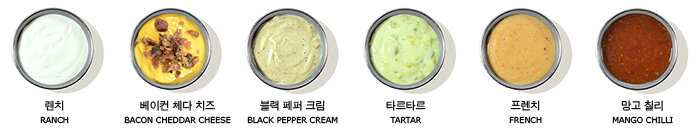
<style>
.page{position:relative;width:700px;height:131px;background:#ffffff}
.page>*{position:absolute;margin:0}
.t1{font:8px/14px "Verdana";color:#000000}
.t2{font:11px/14px "SandJg";color:#000000}
.t3{font:8px/13.1px "Verdana";color:#000000}
</style>
<div class="page">
<p class="t1" style="left:40px;top:100px;width:29px;height:24px;text-align:center"><span class="t2">랜치<br></span>RANCH</p>
<p class="t1" style="left:124px;top:100px;width:107px;height:24px;text-align:center"><span class="t2">베이컨 체다 치즈<br></span>BACON CHEDDAR CHEESE</p>
<p class="t1" style="left:247px;top:100px;width:91px;height:24px;text-align:center"><span class="t2">블랙 페퍼 크림<br></span>BLACK PEPPER CREA<span class="t3">M</span></p>
<p class="t1" style="left:386px;top:100px;width:40px;height:24px;text-align:center"><span class="t2">타르타르<br></span>TARTAR</p>
<p class="t1" style="left:509px;top:100px;width:33px;height:24px;text-align:center"><span class="t2">프렌치<br></span>FRENCH</p>
<p class="t1" style="left:612px;top:100px;width:61px;height:24px;text-align:center"><span class="t2">망고 칠리<br></span>MANGO CHILLI</p>
</div>
